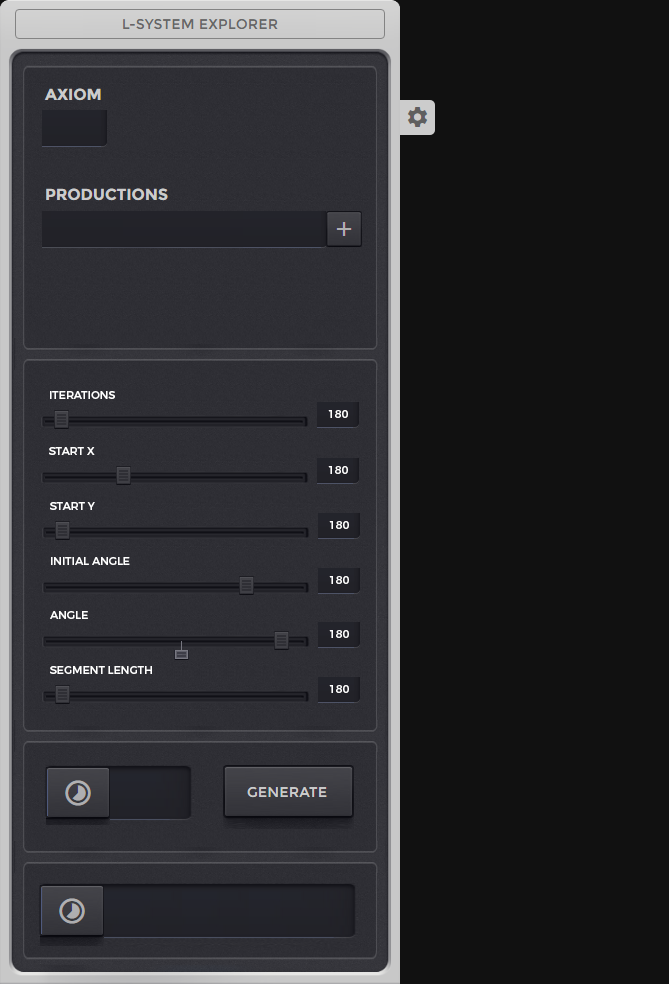
<style>
.page{position:relative;width:669px;height:984px;background:#111111}
.page>*{position:absolute;margin:0}
.t1{font:11px "Montserrat-Regular";color:#ffffff}
</style>
<div class="page">
<p class="t1" style="left:50px;top:391px;width:65px;height:8px">ITERATIONS</p>
<p class="t1" style="left:328px;top:410px;width:20px;height:8px">180</p>
<p class="t1" style="left:49px;top:447px;width:46px;height:8px">START X</p>
<p class="t1" style="left:328px;top:466px;width:20px;height:8px">180</p>
<p class="t1" style="left:50px;top:502px;width:45px;height:8px">START Y</p>
<p class="t1" style="left:329px;top:521px;width:20px;height:8px">180</p>
<p class="t1" style="left:51px;top:557px;width:79px;height:8px">INITIAL ANGLE</p>
<p class="t1" style="left:329px;top:576px;width:20px;height:8px">180</p>
<p class="t1" style="left:50px;top:611px;width:38px;height:8px">ANGLE</p>
<p class="t1" style="left:329px;top:630px;width:20px;height:8px">180</p>
<p class="t1" style="left:50px;top:666px;width:102px;height:8px">SEGMENT LENGTH</p>
<p class="t1" style="left:329px;top:685px;width:20px;height:8px">180</p>
</div>
